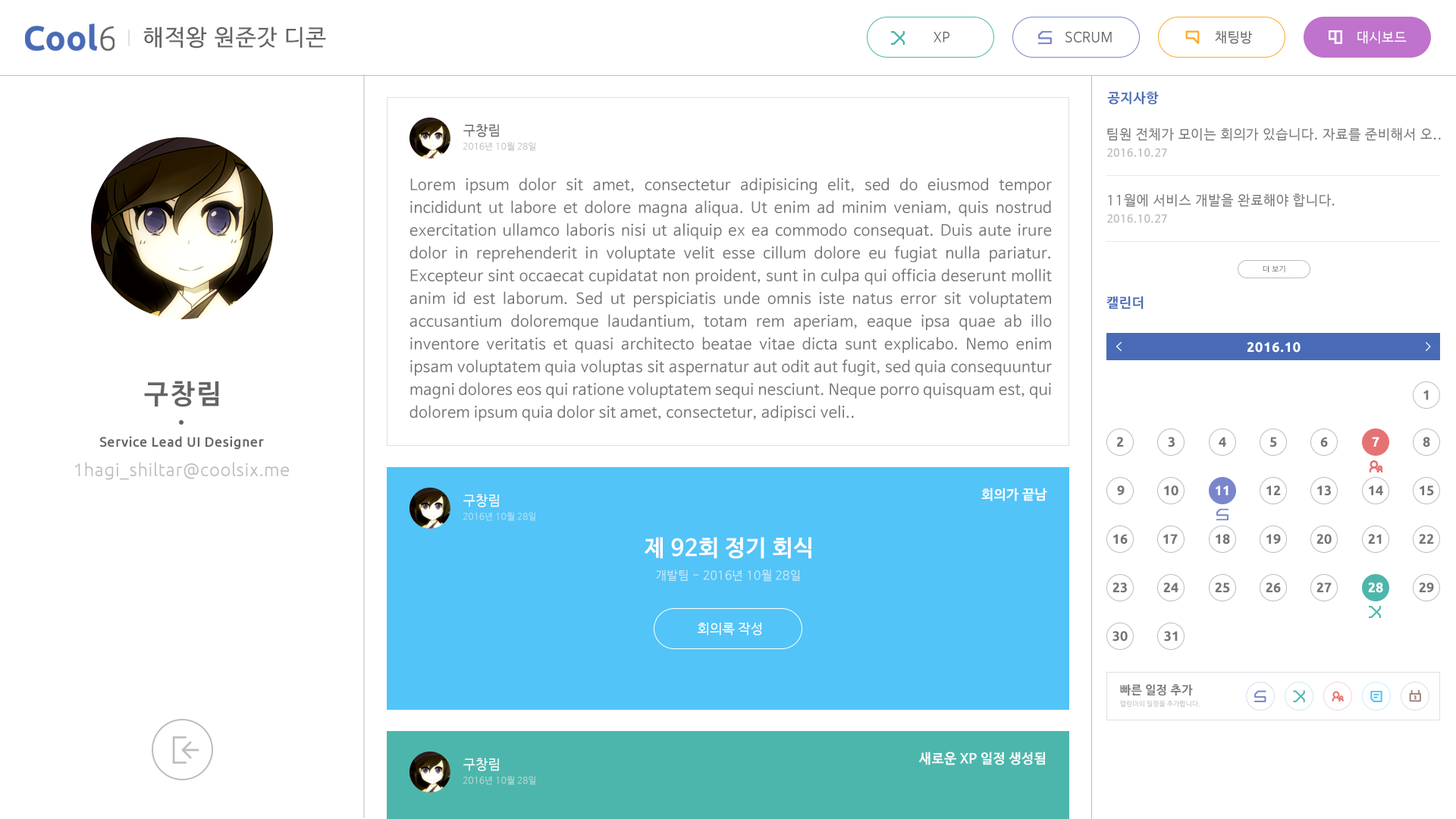
<style>
.page{position:relative;width:1456px;height:819px;background:#ffffff}
.page>*{position:absolute;margin:0}
.t1{font:22.7px "NanumBarunGothic";letter-spacing:0.05em;color:#646464}
.t2{font:13.6px "NanumBarunGothic";letter-spacing:0.025em;color:#646464}
.t3{font:13.6px "NanumBarunGothic";letter-spacing:0.025em;color:#ffffff}
.t4{font:13.6px "NanumBarunGothicBold";letter-spacing:0.05em;color:#496bb7}
.t5{font:13.6px "NanumBarunGothic";letter-spacing:0.025em;color:#616161}
.t6{font:13.6px "NanumBarunGothic";letter-spacing:0.05em;color:#757575}
.t7{font:9.1px "NanumBarunGothic";letter-spacing:0.025em;color:#bdbdbd}
.t8{font:10.6px "NanumBarunGothicBold";letter-spacing:0.05em;color:#bdbdbd}
.t9{font:15.2px/22.7px "NanumBarunGothic";letter-spacing:0.025em;color:#757575}
.t10{font:7.6px "NanumBarunGothic";letter-spacing:0.05em;color:#757575}
.t11{font:13.6px "Ubuntu-Bold";letter-spacing:0.05em;color:#ffffff}
.t12{font:27.3px "NanumBarunGothicBold";letter-spacing:0.075em;color:#646464}
.t13{font:13.6px "Ubuntu-Bold";letter-spacing:0.05em;color:#757575}
.t14{font:13.6px "Ubuntu-Medium";letter-spacing:0.025em;color:#646464}
.t15{font:18.2px "Ubuntu-Light";letter-spacing:0.025em;color:#bdbdbd}
.t16{font:13.6px "Ubuntu-Bold";color:#757575}
.t17{font:13.6px "Ubuntu-Bold";color:#ffffff}
.t18{font:13.6px "NanumBarunGothicBold";letter-spacing:0.025em;color:#ffffff}
.t19{font:9.1px "NanumBarunGothic";letter-spacing:0.025em;color:#b6e3fb}
.t20{font:22.7px "NanumBarunGothicBold";letter-spacing:0.025em;color:#ffffff}
.t21{font:12.1px "NanumBarunGothic";letter-spacing:0.025em;color:#c6e9fc}
.t22{font:12.1px "NanumBarunGothicBold";letter-spacing:0.025em;color:#757575}
.t23{font:6.8px "NanumBarunGothic";letter-spacing:0.025em;color:#bdbdbd}
.t24{font:9.1px "NanumBarunGothic";letter-spacing:0.025em;color:#b5ddd8}
</style>
<div class="page">
<p class="t1" style="left:143px;top:27px;width:183px;height:22px">해적왕 원준갓 디콘</p>
<p class="t2" style="left:933px;top:31px;width:16px;height:11px">XP</p>
<p class="t2" style="left:1065px;top:31px;width:47px;height:11px">SCRUM</p>
<p class="t2" style="left:1215px;top:31px;width:37px;height:13px">채팅방</p>
<p class="t3" style="left:1357px;top:31px;width:50px;height:13px">대시보드</p>
<p class="t4" style="left:1107px;top:91px;width:52px;height:14px">공지사항</p>
<p class="t5" style="left:463px;top:124px;width:36px;height:13px">구창림</p>
<p class="t6" style="left:1107px;top:127px;width:334px;height:14px">팀원 전체가 모이는 회의가 있습니다. 자료를 준비해서 오..</p>
<p class="t7" style="left:463px;top:142px;width:72px;height:9px">2016년 10월 28일</p>
<p class="t8" style="left:1107px;top:148px;width:60px;height:9px">2016.10.27</p>
<p class="t9" style="left:409px;top:177px;width:643px;height:245px;text-align:justify">Lorem ipsum dolor sit amet, consectetur adipisicing elit, sed do eiusmod tempor incididunt ut labore et dolore magna aliqua. Ut enim ad minim veniam, quis nostrud exercitation ullamco laboris nisi ut aliquip ex ea commodo consequat. Duis aute irure dolor in reprehenderit in voluptate velit esse cillum dolore eu fugiat nulla pariatur. Excepteur sint occaecat cupidatat non proident, sunt in culpa qui officia deserunt mollit anim id est laborum. Sed ut perspiciatis unde omnis iste natus error sit voluptatem accusantium doloremque laudantium, totam rem aperiam, eaque ipsa quae ab illo inventore veritatis et quasi architecto beatae vitae dicta sunt explicabo. Nemo enim ipsam voluptatem quia voluptas sit aspernatur aut odit aut fugit, sed quia consequuntur magni dolores eos qui ratione voluptatem sequi nesciunt. Neque porro quisquam est, qui dolorem ipsum quia dolor sit amet, consectetur, adipisci veli..</p>
<p class="t6" style="left:1108px;top:193px;width:227px;height:14px">11월에 서비스 개발을 완료해야 합니다.</p>
<p class="t8" style="left:1107px;top:214px;width:60px;height:9px">2016.10.27</p>
<p class="t10" style="left:1263px;top:265px;width:22px;height:8px">더 보기</p>
<p class="t4" style="left:1106px;top:296px;width:38px;height:13px">캘린더</p>
<p class="t11" style="left:1247px;top:342px;width:54px;height:11px">2016.10</p>
<p class="t12" style="left:144px;top:381px;width:75px;height:26px">구창림</p>
<p class="t13" style="left:1423px;top:390px;width:6px;height:10px">1</p>
<p class="t14" style="left:99px;top:436px;width:165px;height:14px">Service Lead UI Designer</p>
<p class="t13" style="left:1116px;top:437px;width:8px;height:10px">2</p>
<p class="t13" style="left:1168px;top:437px;width:7px;height:10px">3</p>
<p class="t13" style="left:1219px;top:437px;width:7px;height:10px">4</p>
<p class="t13" style="left:1269px;top:437px;width:8px;height:10px">5</p>
<p class="t13" style="left:1320px;top:437px;width:8px;height:10px">6</p>
<p class="t11" style="left:1372px;top:437px;width:7px;height:10px">7</p>
<p class="t13" style="left:1423px;top:437px;width:7px;height:10px">8</p>
<p class="t15" style="left:75px;top:462px;width:214px;height:18px">1hagi_shiltar@coolsix.me</p>
<p class="t13" style="left:1117px;top:485px;width:8px;height:10px">9</p>
<p class="t16" style="left:1164px;top:485px;width:14px;height:11px">10</p>
<p class="t17" style="left:1216px;top:485px;width:12px;height:10px">11</p>
<p class="t16" style="left:1266px;top:485px;width:15px;height:10px">12</p>
<p class="t16" style="left:1317px;top:485px;width:14px;height:11px">13</p>
<p class="t16" style="left:1369px;top:485px;width:14px;height:10px">14</p>
<p class="t16" style="left:1420px;top:485px;width:14px;height:11px">15</p>
<p class="t3" style="left:463px;top:494px;width:36px;height:13px">구창림</p>
<p class="t3" style="left:463px;top:494px;width:36px;height:13px">구창림</p>
<p class="t3" style="left:463px;top:494px;width:36px;height:13px">구창림</p>
<p class="t18" style="left:981px;top:488px;width:66px;height:13px">회의가 끝남</p>
<p class="t18" style="left:981px;top:488px;width:66px;height:13px">회의가 끝남</p>
<p class="t19" style="left:463px;top:512px;width:72px;height:9px">2016년 10월 28일</p>
<p class="t19" style="left:463px;top:512px;width:72px;height:9px">2016년 10월 28일</p>
<p class="t19" style="left:463px;top:512px;width:72px;height:9px">2016년 10월 28일</p>
<p class="t16" style="left:1113px;top:534px;width:15px;height:10px">16</p>
<p class="t16" style="left:1163px;top:534px;width:15px;height:10px">17</p>
<p class="t16" style="left:1216px;top:534px;width:14px;height:10px">18</p>
<p class="t16" style="left:1266px;top:534px;width:15px;height:10px">19</p>
<p class="t16" style="left:1316px;top:534px;width:16px;height:10px">20</p>
<p class="t16" style="left:1368px;top:534px;width:14px;height:10px">21</p>
<p class="t16" style="left:1419px;top:534px;width:15px;height:10px">22</p>
<p class="t20" style="left:645px;top:537px;width:166px;height:22px">제 92회 정기 회식</p>
<p class="t21" style="left:656px;top:570px;width:144px;height:12px">개발팀 - 2016년 10월 28일</p>
<p class="t16" style="left:1112px;top:582px;width:15px;height:11px">23</p>
<p class="t16" style="left:1163px;top:582px;width:15px;height:10px">24</p>
<p class="t16" style="left:1215px;top:582px;width:15px;height:11px">25</p>
<p class="t16" style="left:1266px;top:582px;width:15px;height:11px">26</p>
<p class="t16" style="left:1316px;top:582px;width:16px;height:10px">27</p>
<p class="t17" style="left:1368px;top:582px;width:15px;height:11px">28</p>
<p class="t16" style="left:1419px;top:582px;width:15px;height:10px">29</p>
<p class="t3" style="left:698px;top:622px;width:63px;height:13px">회의록 작성</p>
<p class="t16" style="left:1112px;top:631px;width:16px;height:11px">30</p>
<p class="t16" style="left:1164px;top:631px;width:14px;height:11px">31</p>
<p class="t22" style="left:1120px;top:684px;width:73px;height:12px">빠른 일정 추가</p>
<p class="t23" style="left:1120px;top:700px;width:80px;height:8px">캘린더의 일정을 추가합니다.</p>
<p class="t3" style="left:463px;top:758px;width:36px;height:13px">구창림</p>
<p class="t18" style="left:918px;top:751px;width:127px;height:14px">새로운 XP 일정 생성됨</p>
<p class="t24" style="left:463px;top:776px;width:72px;height:9px">2016년 10월 28일</p>
</div>
